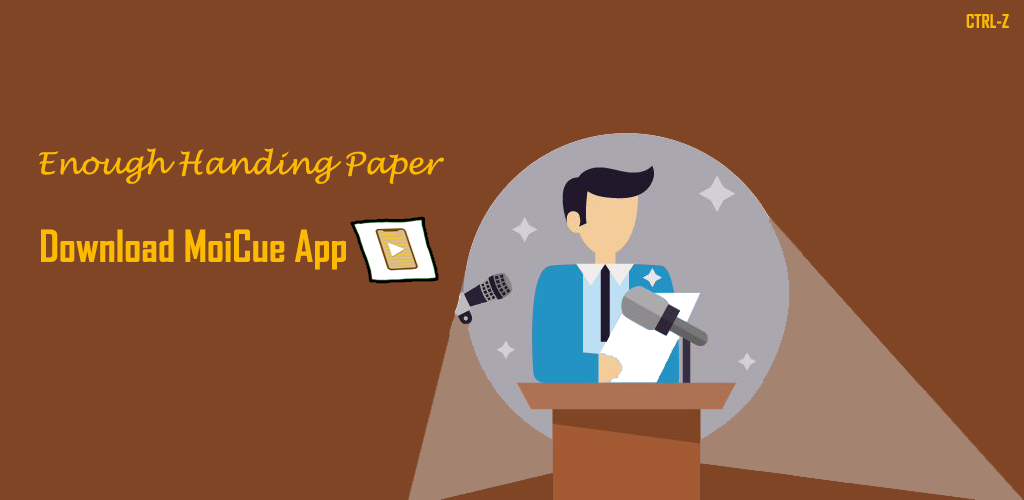
<style>
.page{position:relative;width:1024px;height:500px;background:#804525}
.page>*{position:absolute;margin:0}
.t1{font:18px "AgencyFB-Bold";color:#fcba03}
.t2{font:30px "LucidaHandwriting-Italic";color:#fcba03}
.t3{font:42px "AgencyFB-Bold";color:#fcba03}
</style>
<div class="page">
<p class="t1" style="left:966px;top:14px;width:43px;height:14px">CTRL-Z</p>
<p class="t2" style="left:39px;top:148px;width:405px;height:36px">Enough Handing Paper</p>
<p class="t3" style="left:41px;top:229px;width:305px;height:41px">Download MoiCue App</p>
</div>
